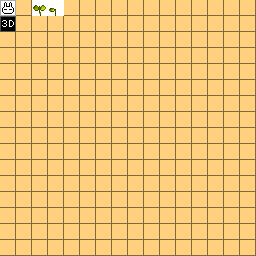
<style>
.page{position:relative;width:256px;height:256px;background:#ffd17f}
.page>*{position:absolute;margin:0}
.t1{font:10px "ArialMT";color:#ffffff}
</style>
<div class="page">
<p class="t1" style="left:2px;top:20px;width:12px;height:7px">3D</p>
</div>
